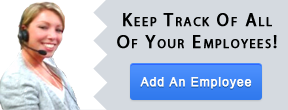
<style>
.page{position:relative;width:288px;height:110px;background:#d5dae0}
.page>*{position:absolute;margin:0}
.t1{font:18px "MyriadPro-Regular";letter-spacing:0.1em;color:#000101;font-variant:small-caps;font-weight:bold}
.t2{font:12px "ArialMT";letter-spacing:0.06em;color:#fefefe;font-weight:bold}
</style>
<div class="page">
<p class="t1" style="left:117px;top:13px;width:160px;height:36px;text-align:center">Keep Track Of All<br>Of Your Employees!</p>
<p class="t2" style="left:140px;top:77px;width:112px;height:12px">Add An Employee</p>
</div>
